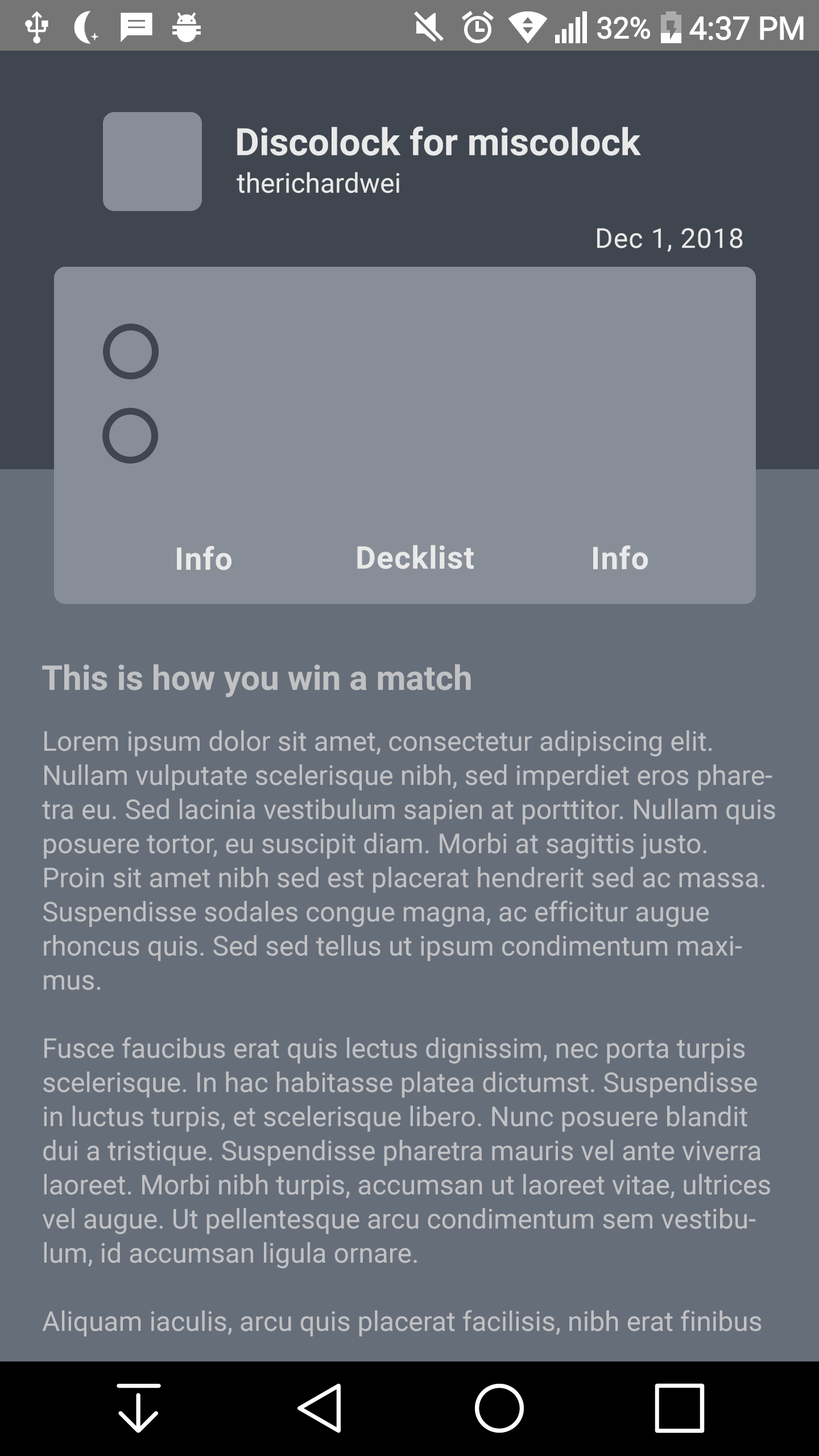
<style>
.page{position:relative;width:819px;height:1456px;background:#666e7a}
.page>*{position:absolute;margin:0}
.t1{font:37.5px "Roboto-Bold";color:#e8e8e8}
.t2{font:27.3px "Roboto-Regular";color:#e9e9e9}
.t3{font:27.3px "Roboto-Regular";letter-spacing:0.025em;color:#e9e9e9}
.t4{font:31.3px "Roboto-Bold";letter-spacing:0.025em;color:#e9e9e9}
.t5{font:34.1px "Roboto-Bold";color:#c0c1c3}
.t6{font:27.3px/34.1px "Roboto-Regular";color:#c0c1c3}
</style>
<div class="page">
<p class="t1" style="left:237px;top:126px;width:404px;height:30px">Discolock for miscolock</p>
<p class="t2" style="left:237px;top:172px;width:162px;height:21px">therichardwei</p>
<p class="t3" style="left:597px;top:228px;width:146px;height:24px">Dec 1, 2018</p>
<p class="t4" style="left:177px;top:546px;width:54px;height:24px">Info</p>
<p class="t4" style="left:357px;top:545px;width:117px;height:24px">Decklist</p>
<p class="t4" style="left:593px;top:545px;width:55px;height:25px">Info</p>
<p class="t5" style="left:42px;top:664px;width:429px;height:33px">This is how you win a match</p>
<p class="t6" style="left:42px;top:730px;width:733px;height:607px">Lorem ipsum dolor sit amet, consectetur adipiscing elit. Nullam vulputate scelerisque nibh, sed imperdiet eros pharetra eu. Sed lacinia vestibulum sapien at porttitor. Nullam quis posuere tortor, eu suscipit diam. Morbi at sagittis justo. Proin sit amet nibh sed est placerat hendrerit sed ac massa. Suspendisse sodales congue magna, ac efficitur augue rhoncus quis. Sed sed tellus ut ipsum condimentum maximus. <br><br>Fusce faucibus erat quis lectus dignissim, nec porta turpis scelerisque. In hac habitasse platea dictumst. Suspendisse in luctus turpis, et scelerisque libero. Nunc posuere blandit dui a tristique. Suspendisse pharetra mauris vel ante viverra laoreet. Morbi nibh turpis, accumsan ut laoreet vitae, ultrices vel augue. Ut pellentesque arcu condimentum sem vestibulum, id accumsan ligula ornare.<br><br>Aliquam iaculis, arcu quis placerat facilisis, nibh erat finibus</p>
</div>
